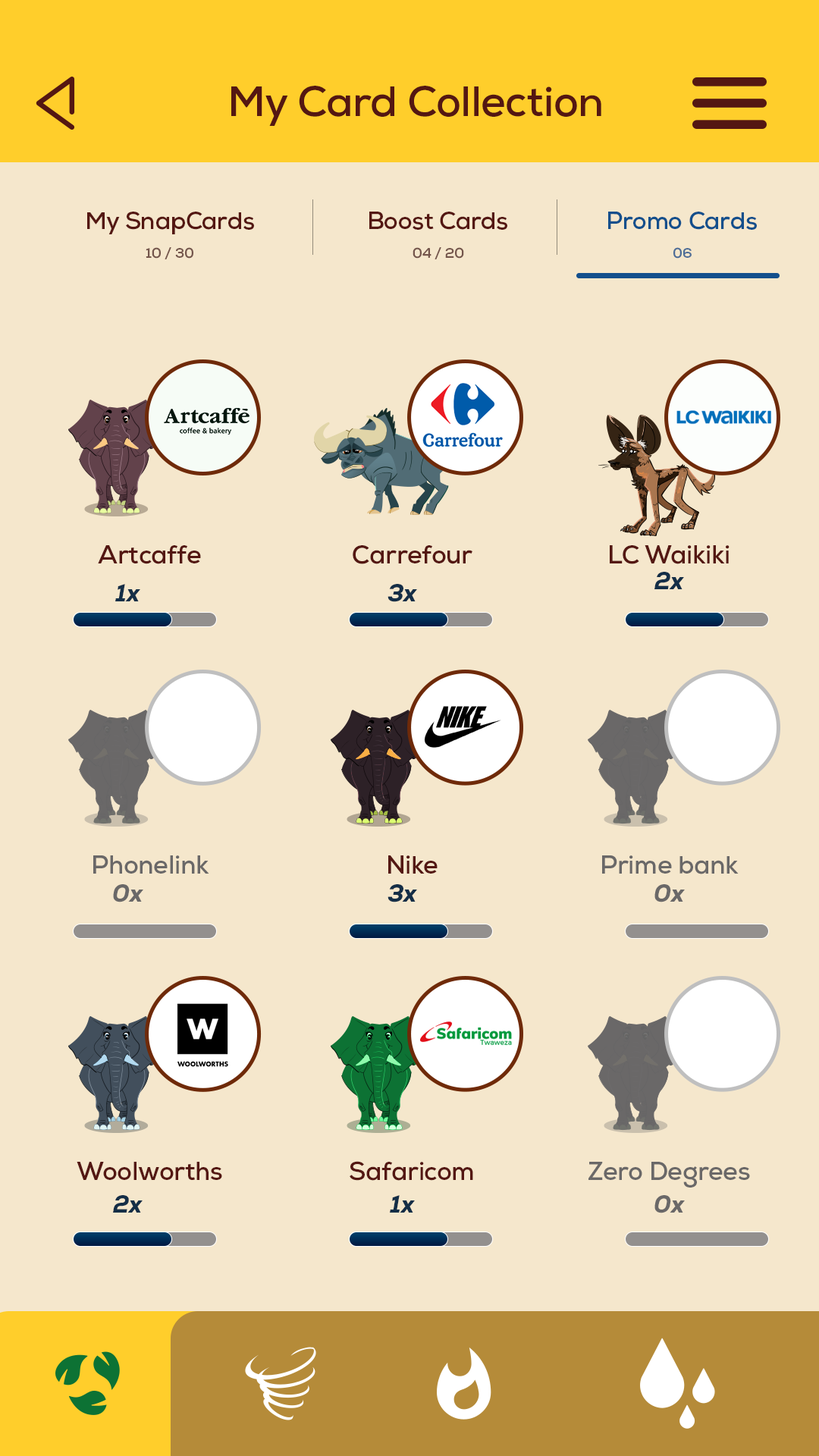
<style>
.page{position:relative;width:819px;height:1456px;background:#f5e7cc}
.page>*{position:absolute;margin:0}
.t1{font:42.5px "Nexa-Bold";letter-spacing:-0.01em;color:#541712}
.t2{font:24.3px "Nexa-Bold";letter-spacing:-0.01em;color:#541712}
.t3{font:24.3px "Nexa-Bold";letter-spacing:-0.01em;color:#134f8c}
.t4{font:14.2px "Nexa-Bold";letter-spacing:-0.01em;color:#74554b}
.t5{font:14.2px "Nexa-Bold";letter-spacing:-0.01em;color:#4d6d97}
.t6{font:25.5px "Nexa-Bold";letter-spacing:-0.01em;color:#541712}
.t7{font:24.3px "Nexa-Heavy-Italic";letter-spacing:-0.01em;color:#142e47}
.t8{font:25.5px "Nexa-Bold";letter-spacing:-0.01em;color:#6a6868}
.t9{font:24.3px "Nexa-Heavy-Italic";letter-spacing:-0.01em;color:#6a6868}
</style>
<div class="page">
<p class="t1" style="left:231px;top:86px;width:370px;height:40px">My Card Collection</p>
<p class="t2" style="left:87px;top:212px;width:167px;height:22px">My SnapCards</p>
<p class="t2" style="left:369px;top:212px;width:138px;height:18px">Boost Cards</p>
<p class="t3" style="left:608px;top:212px;width:149px;height:18px">Promo Cards</p>
<p class="t4" style="left:146px;top:247px;width:47px;height:12px">10 / 30</p>
<p class="t4" style="left:413px;top:247px;width:51px;height:12px">04 / 20</p>
<p class="t5" style="left:673px;top:247px;width:19px;height:12px">06</p>
<p class="t6" style="left:98px;top:545px;width:103px;height:19px">Artcaffe</p>
<p class="t6" style="left:353px;top:545px;width:119px;height:19px">Carrefour</p>
<p class="t6" style="left:610px;top:545px;width:120px;height:19px">LC Waikiki</p>
<p class="t7" style="left:654px;top:572px;width:30px;height:17px">2x</p>
<p class="t7" style="left:115px;top:584px;width:25px;height:17px">1x</p>
<p class="t7" style="left:388px;top:584px;width:29px;height:18px">3x</p>
<p class="t8" style="left:93px;top:855px;width:116px;height:19px">Phonelink</p>
<p class="t6" style="left:388px;top:855px;width:50px;height:19px">Nike</p>
<p class="t8" style="left:602px;top:855px;width:137px;height:19px">Prime bank</p>
<p class="t9" style="left:113px;top:884px;width:30px;height:18px">0x</p>
<p class="t7" style="left:388px;top:884px;width:29px;height:18px">3x</p>
<p class="t9" style="left:654px;top:884px;width:31px;height:18px">0x</p>
<p class="t6" style="left:77px;top:1162px;width:145px;height:18px">Woolworths</p>
<p class="t6" style="left:350px;top:1161px;width:123px;height:20px">Safaricom</p>
<p class="t8" style="left:588px;top:1162px;width:162px;height:26px">Zero Degrees</p>
<p class="t7" style="left:113px;top:1195px;width:30px;height:18px">2x</p>
<p class="t7" style="left:390px;top:1195px;width:25px;height:18px">1x</p>
<p class="t9" style="left:654px;top:1195px;width:31px;height:18px">0x</p>
</div>
